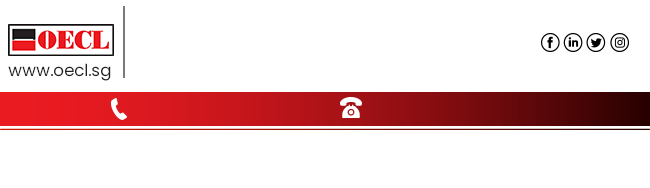
<style>
.page{position:relative;width:650px;height:188px;background:#ffffff}
.page>*{position:absolute;margin:0}
.t1{font:16.7px "Poppins-Regular";color:#231f20}
</style>
<div class="page">
<p class="t1" style="left:8px;top:63px;width:103px;height:18px">www.oecl.sg</p>
</div>
